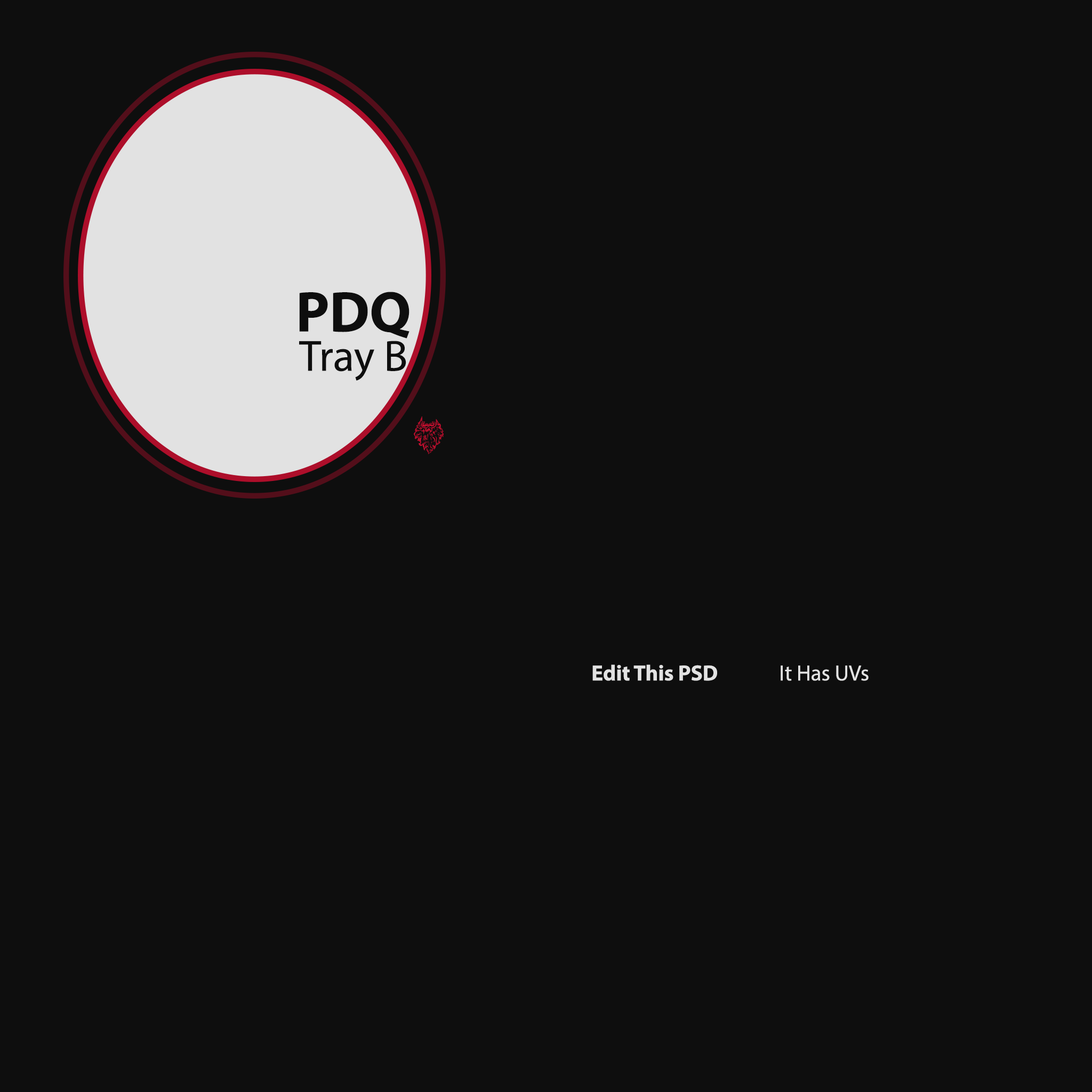
<style>
.page{position:relative;width:1092px;height:1092px;background:#0e0e0e}
.page>*{position:absolute;margin:0}
.t1{font:43.8px/39.3px "MyriadPro-Regular";color:#0e0e0e}
.t2{font:57.8px/39.3px "MyriadPro-Bold";color:#0e0e0e}
.t3{font:21.9px "MyriadPro-Bold";color:#e2e2e2}
.t4{font:21.9px "MyriadPro-Regular";color:#e2e2e2}
</style>
<div class="page">
<p class="t1" style="left:299px;top:292px;width:110px;height:89px;text-align:center"><span class="t2">PDQ<br></span>Tray B</p>
<p class="t3" style="left:592px;top:664px;width:125px;height:17px">Edit This PSD</p>
<p class="t4" style="left:781px;top:665px;width:88px;height:16px">It Has UVs</p>
</div>
